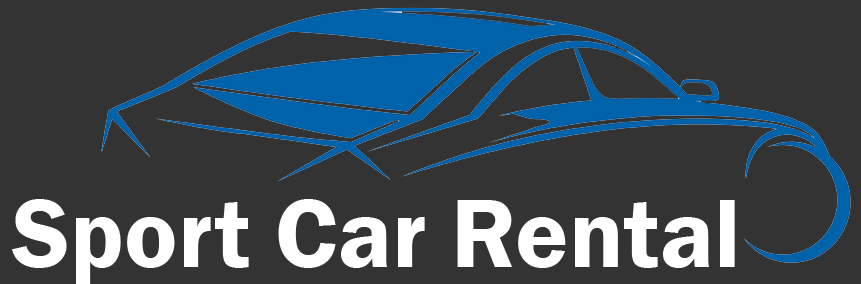
<style>
.page{position:relative;width:861px;height:284px;background:#333333}
.page>*{position:absolute;margin:0}
.t1{font:100px "FranklinGothic-Demi";color:#ffffff}
</style>
<div class="page">
<p class="t1" style="left:12px;top:199px;width:723px;height:85px">Sport Car Rental</p>
</div>
